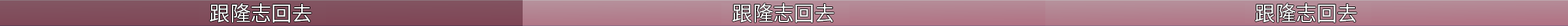
<style>
.page{position:relative;width:1568px;height:26px}
.page>*{position:absolute;margin:0}
.t1{font:20.6px "SourceHanSansSC-Normal";color:#ffffff}
</style>
<div class="page">
<p class="t1" style="left:210px;top:3px;width:102px;height:20px">跟隆志回去</p>
<p class="t1" style="left:732px;top:3px;width:102px;height:20px">跟隆志回去</p>
<p class="t1" style="left:1255px;top:3px;width:102px;height:20px">跟隆志回去</p>
</div>
